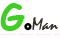
<style>
.page{position:relative;width:60px;height:38px;background:#ffffff}
.page>*{position:absolute;margin:0}
.t1{font:18px "Mistral";color:#312e24}
.t2{font:36px "ComicSansMS-Bold";color:#40cd24}
.t3{font:14px "STHupo";color:#000000}
</style>
<div class="page">
<p class="t1" style="left:0px;top:3px;width:58px;height:28px"><span class="t2">G</span><span class="t3">o</span>Man</p>
</div>
